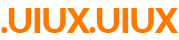
<style>
.page{position:relative;width:179px;height:40px;background:#ffffff}
.page>*{position:absolute;margin:0}
.t1{font:30px "GmarketSansTTFBold";letter-spacing:-0.025em;color:#ff7800}
</style>
<div class="page">
<p class="t1" style="left:1px;top:8px;width:89px;height:25px">.UIUX</p>
<p class="t1" style="left:89px;top:8px;width:89px;height:25px">.UIUX</p>
</div>
